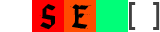
<style>
.page{position:relative;width:160px;height:32px;background:#ffffff}
.page>*{position:absolute;margin:0}
.t1{font:38.9px "VeryChristmess";color:#000000}
.t2{font:30.6px "ArialMT";color:#404040}
</style>
<div class="page">
<p class="t1" style="left:39px;top:4px;width:17px;height:26px">S</p>
<p class="t1" style="left:70px;top:4px;width:22px;height:25px">E</p>
<p class="t2" style="left:129px;top:2px;width:31px;height:28px">[  ]</p>
</div>
